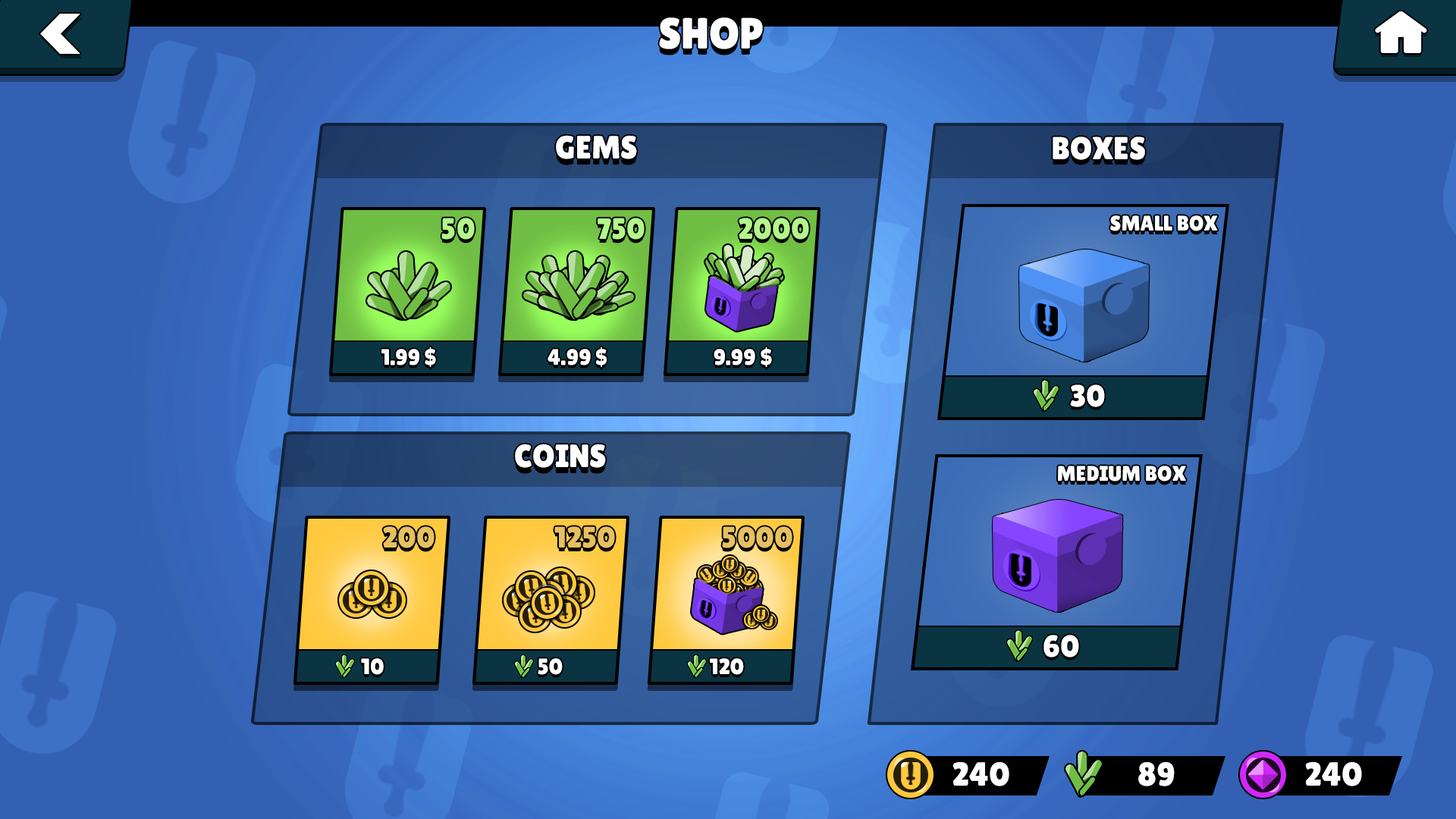
<style>
.page{position:relative;width:1456px;height:819px}
.page>*{position:absolute;margin:0}
.t1{font:43.6px "LilitaOne";color:#ffffff}
.t2{font:32.2px "LilitaOne";color:#ffffff}
.t3{font:31.7px "LilitaOne";color:#ffffff}
.t4{font:29.3px "LilitaOne";color:#b3f78b}
.t5{font:21.1px "LilitaOne";color:#ffffff}
.t6{font:22.2px "LilitaOne";color:#ffffff}
.t7{font:30.4px "LilitaOne";color:#ffffff}
.t8{font:29.3px "LilitaOne";color:#e6c061}
.t9{font:33.2px "LilitaOne";color:#ffffff}
</style>
<div class="page">
<p class="t1" style="left:659px;top:17px;width:104px;height:32px">SHOP</p>
<p class="t2" style="left:556px;top:135px;width:81px;height:24px">GEMS</p>
<p class="t3" style="left:1053px;top:136px;width:92px;height:24px">BOXES</p>
<p class="t4" style="left:441px;top:218px;width:34px;height:22px">50</p>
<p class="t4" style="left:598px;top:218px;width:47px;height:22px">750</p>
<p class="t4" style="left:739px;top:218px;width:70px;height:22px">2000</p>
<p class="t5" style="left:1110px;top:215px;width:108px;height:16px">SMALL BOX</p>
<p class="t6" style="left:381px;top:347px;width:55px;height:20px">1.99 $</p>
<p class="t6" style="left:548px;top:347px;width:59px;height:20px">4.99 $</p>
<p class="t6" style="left:714px;top:347px;width:58px;height:20px">9.99 $</p>
<p class="t7" style="left:1070px;top:384px;width:35px;height:23px">30</p>
<p class="t2" style="left:515px;top:444px;width:91px;height:24px">COINS</p>
<p class="t5" style="left:1058px;top:466px;width:128px;height:16px">MEDIUM BOX</p>
<p class="t8" style="left:383px;top:526px;width:52px;height:22px">200</p>
<p class="t8" style="left:554px;top:526px;width:61px;height:22px">1250</p>
<p class="t8" style="left:722px;top:526px;width:70px;height:22px">5000</p>
<p class="t7" style="left:1043px;top:635px;width:36px;height:22px">60</p>
<p class="t6" style="left:361px;top:658px;width:23px;height:17px">10</p>
<p class="t6" style="left:538px;top:658px;width:25px;height:17px">50</p>
<p class="t6" style="left:710px;top:658px;width:34px;height:17px">120</p>
<p class="t9" style="left:953px;top:762px;width:56px;height:24px">240</p>
<p class="t9" style="left:1138px;top:762px;width:37px;height:24px">89</p>
<p class="t9" style="left:1306px;top:762px;width:56px;height:24px">240</p>
</div>
